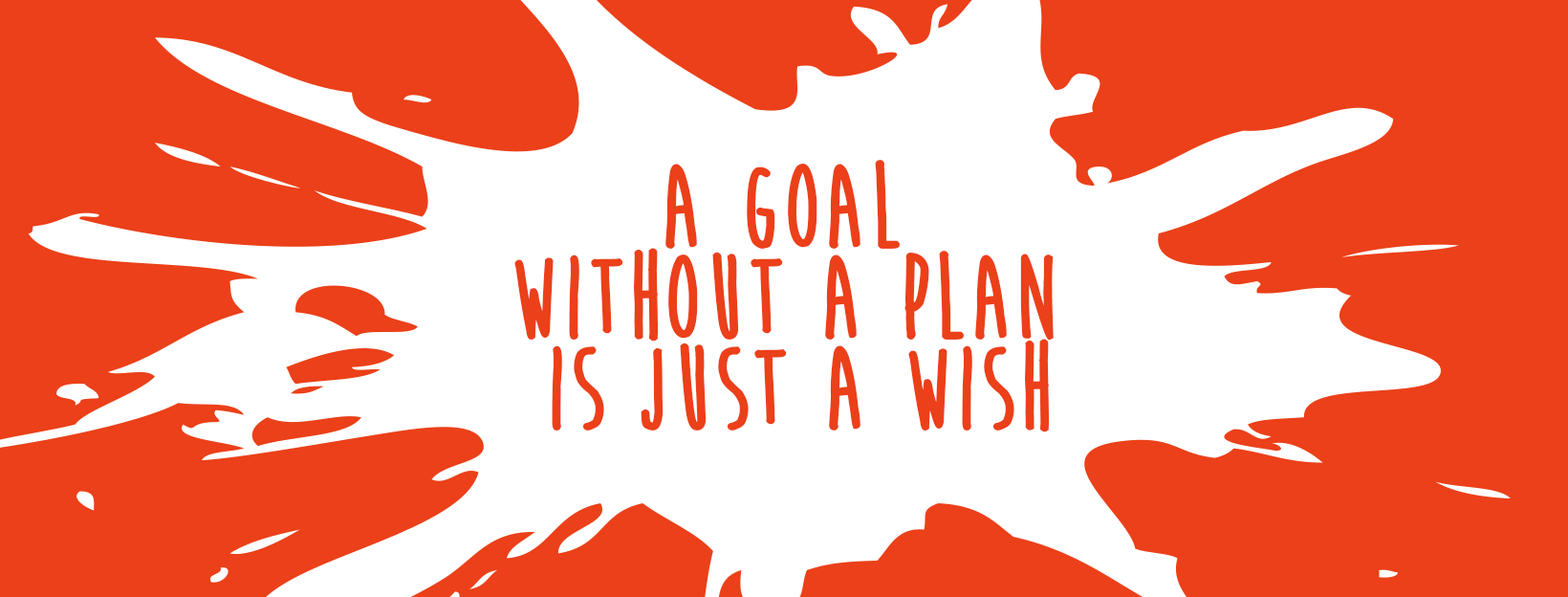
<style>
.page{position:relative;width:1568px;height:597px;background:#eb4019}
.page>*{position:absolute;margin:0}
.t1{font:118.6px/90.8px "MoonFlowerBold";color:#eb4019;font-weight:bold}
</style>
<div class="page">
<p class="t1" style="left:514px;top:160px;width:540px;height:272px;text-align:center">a goal <br>without a plan <br>is just a wish</p>
</div>
